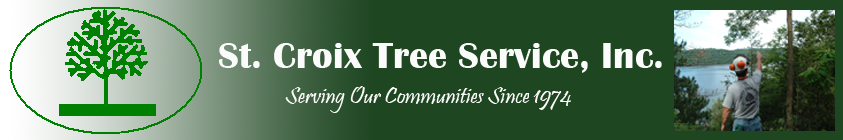
<style>
.page{position:relative;width:843px;height:140px;background:#1e4621}
.page>*{position:absolute;margin:0}
.t1{font:38px "BritannicBold";color:#fcfbfb}
.t2{font:24px "Pristina-Regular";color:#fcfbfb}
</style>
<div class="page">
<p class="t1" style="left:219px;top:43px;width:443px;height:30px">St. Croix Tree Service, Inc.</p>
<p class="t2" style="left:285px;top:86px;width:286px;height:27px">Serving Our Communities Since 1974</p>
</div>
